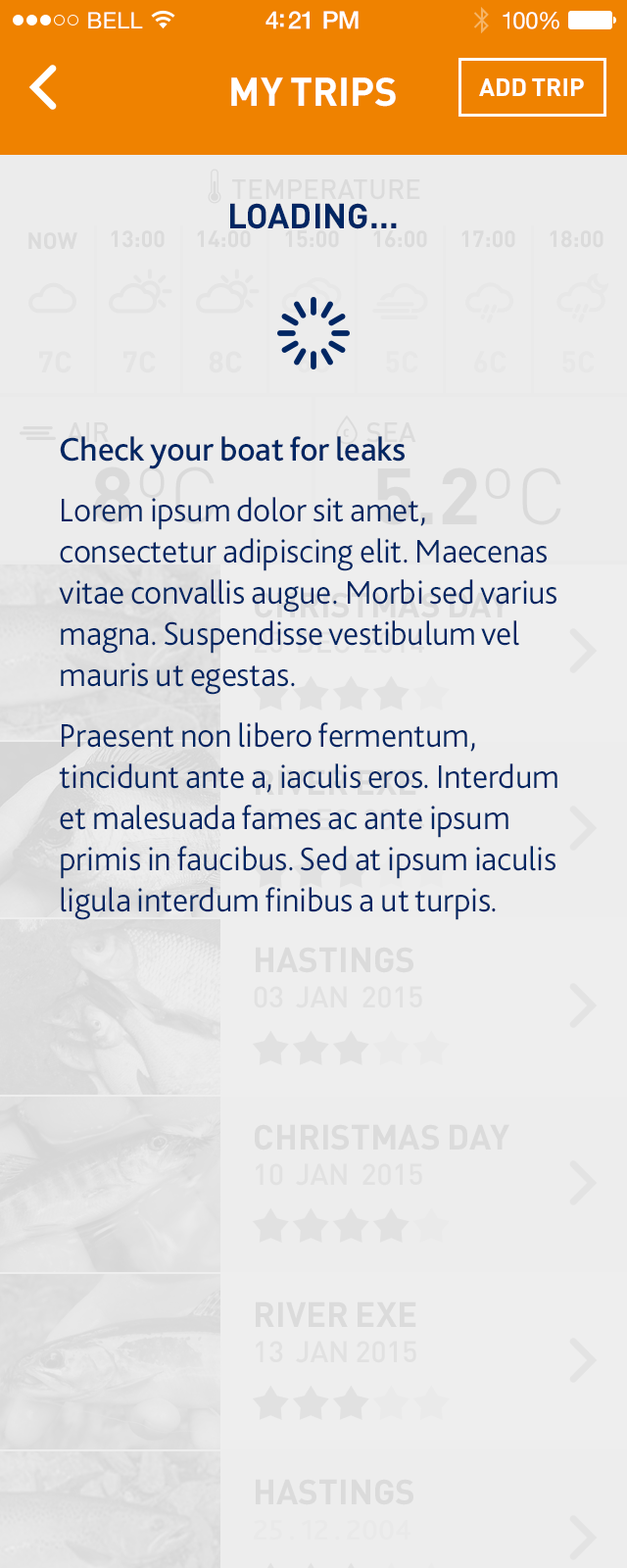
<style>
.page{position:relative;width:627px;height:1568px;background:#ececec}
.page>*{position:absolute;margin:0}
.t1{font:22.5px "HelveticaNeue";letter-spacing:0.02em;color:#ffffff}
.t2{font:24.5px "HelveticaNeue-Medium";letter-spacing:-0.02em;color:#ffffff}
.t3{font:23.5px "HelveticaNeue";letter-spacing:-0.02em;color:#ffffff}
.t4{font:39.2px "DIN-Bold";color:#ffffff;text-transform:uppercase}
.t5{font:24.5px "DIN-Bold";color:#ffffff;text-transform:uppercase}
.t6{font:34.3px "DIN-Bold";color:#002663;text-transform:uppercase}
.t7{font:34.3px "Bliss2-Light";letter-spacing:-0.01em;color:#002663}
.t8{font:34.3px "Bliss2-Medium";letter-spacing:-0.01em;color:#002663}
</style>
<div class="page">
<p class="t1" style="left:88px;top:12px;width:55px;height:16px">BELL</p>
<p class="t2" style="left:266px;top:11px;width:93px;height:18px">4:21 PM</p>
<p class="t3" style="left:503px;top:12px;width:57px;height:17px">100%</p>
<p class="t4" style="left:231px;top:77px;width:165px;height:30px">my trips</p>
<p class="t5" style="left:479px;top:78px;width:105px;height:18px">add trip</p>
<p class="t6" style="left:230px;top:203px;width:167px;height:26px">Loading...</p>
<p class="t7" style="left:59px;top:436px;width:499px;height:484px"><span class="t8">Check your boat for leaks<br></span>Lorem ipsum dolor sit amet, consectetur adipiscing elit. Maecenas vitae convallis augue. Morbi sed varius magna. Suspendisse vestibulum vel mauris ut egestas.<br>Praesent non libero fermentum, tincidunt ante a, iaculis eros. Interdum et malesuada fames ac ante ipsum primis in faucibus. Sed at ipsum iaculis ligula interdum finibus a ut turpis.</p>
</div>
